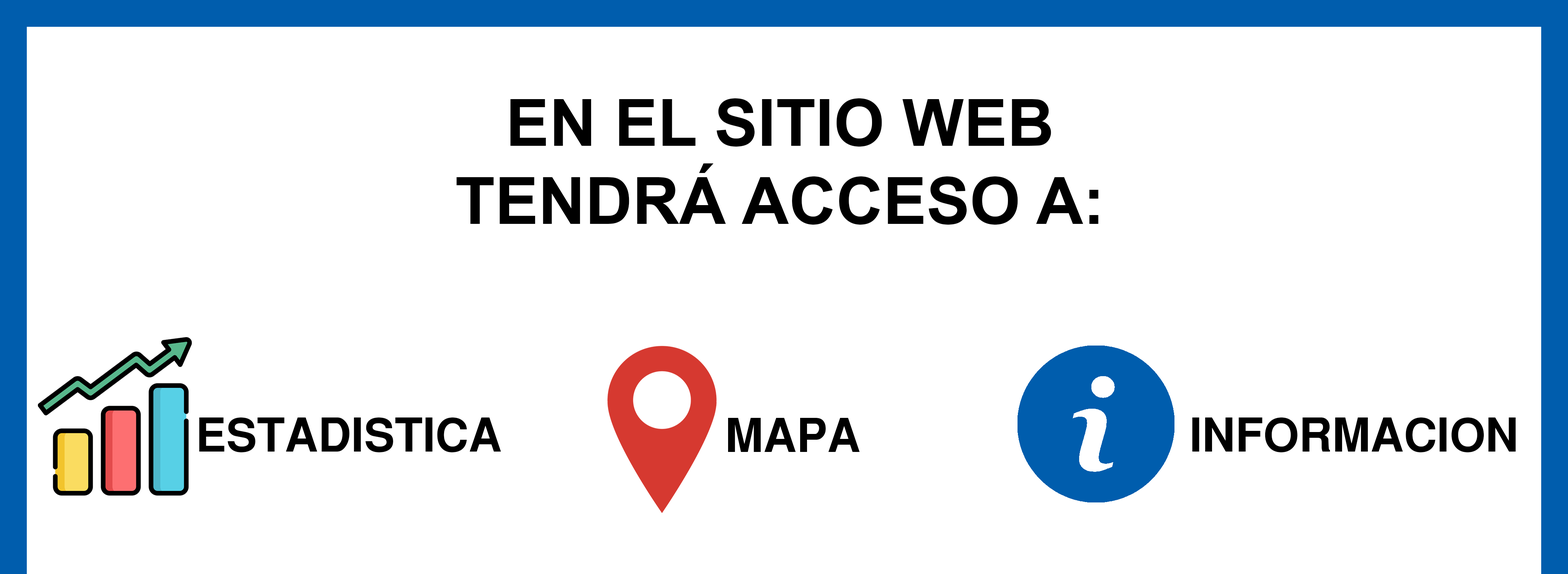
<style>
.page{position:relative;width:1568px;height:574px;background:#ffffff}
.page>*{position:absolute;margin:0}
.t1{font:65.1px "Arial-BoldMT";color:#000000}
.t2{font:45.9px "SansSerifBold";color:#000000}
</style>
<div class="page">
<p class="t1" style="left:456px;top:98px;width:643px;height:127px;text-align:center">EN EL SITIO WEB<br>TENDRÁ ACCESO A:</p>
<p class="t2" style="left:199px;top:418px;width:302px;height:34px">ESTADISTICA</p>
<p class="t2" style="left:728px;top:418px;width:132px;height:34px">MAPA</p>
<p class="t2" style="left:1192px;top:418px;width:324px;height:34px">INFORMACION</p>
</div>
